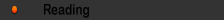
<style>
.page{position:relative;width:224px;height:20px;background:#333333}
.page>*{position:absolute;margin:0}
.t1{font:14.9px "ArialRoundedMTBold";color:#030303;scale:0.78 1}
</style>
<div class="page">
<p class="t1" style="left:44px;top:4px;width:45px;height:14px">Reading</p>
</div>
